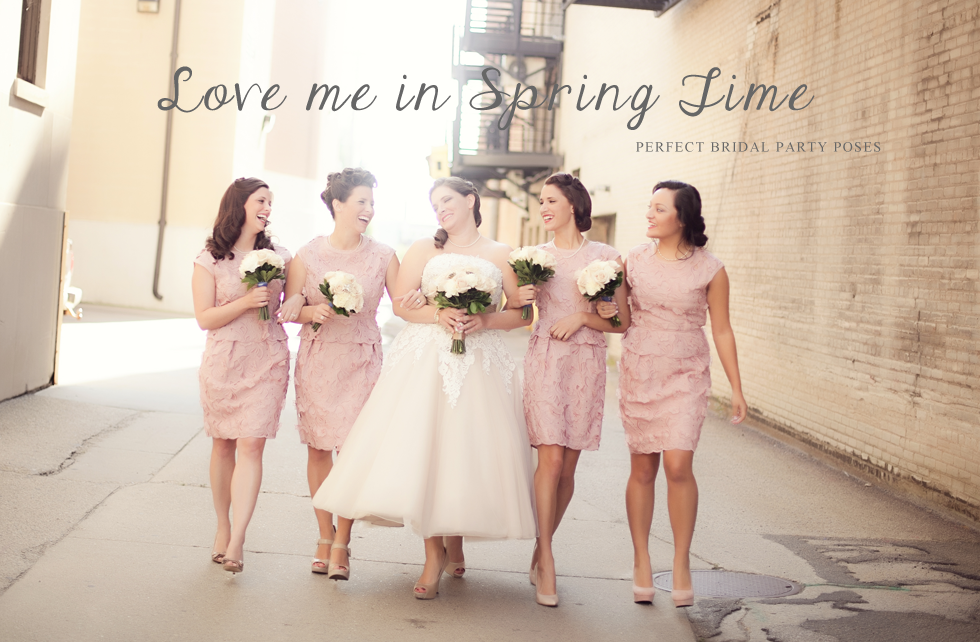
<style>
.page{position:relative;width:980px;height:642px}
.page>*{position:absolute;margin:0}
.t1{font:48.4px "JandaElegantHandwriting";letter-spacing:0.1em;color:#666666}
.t2{font:14px "TimesNewRomanPSMT";letter-spacing:0.1em;color:#666666}
</style>
<div class="page">
<p class="t1" style="left:157px;top:66px;width:658px;height:65px">Love me in Spring Time</p>
<p class="t2" style="left:636px;top:142px;width:245px;height:10px">PERFECT BRIDAL PARTY POSES</p>
</div>
